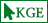
<style>
.page{position:relative;width:48px;height:23px;background:#ffffff}
.page>*{position:absolute;margin:0}
.t1{font:13px "NanumMyeongjoExtraBold";color:#007a29}
</style>
<div class="page">
<p class="t1" style="left:16px;top:7px;width:28px;height:11px">KGE</p>
</div>
